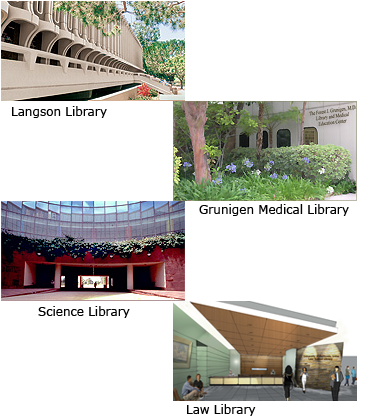
<style>
.page{position:relative;width:371px;height:420px;background:#ffffff}
.page>*{position:absolute;margin:0}
.t1{font:12px "Verdana";color:#000000}
</style>
<div class="page">
<p class="t1" style="left:12px;top:106px;width:95px;height:12px">Langson Library</p>
<p class="t1" style="left:199px;top:204px;width:150px;height:12px">Grunigen Medical Library</p>
<p class="t1" style="left:38px;top:306px;width:92px;height:12px">Science Library</p>
<p class="t1" style="left:187px;top:404px;width:69px;height:12px">Law Library</p>
</div>
